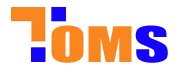
<style>
.page{position:relative;width:180px;height:72px;background:#ffffff}
.page>*{position:absolute;margin:0}
.t1{font:45.2px "Impact";color:#fa861f;scale:1.49 1}
.t2{font:45.2px "Impact";color:#1503fc;scale:1.49 1}
</style>
<div class="page">
<p class="t1" style="left:51px;top:25px;width:117px;height:38px">OM<span class="t2">S</span></p>
</div>
